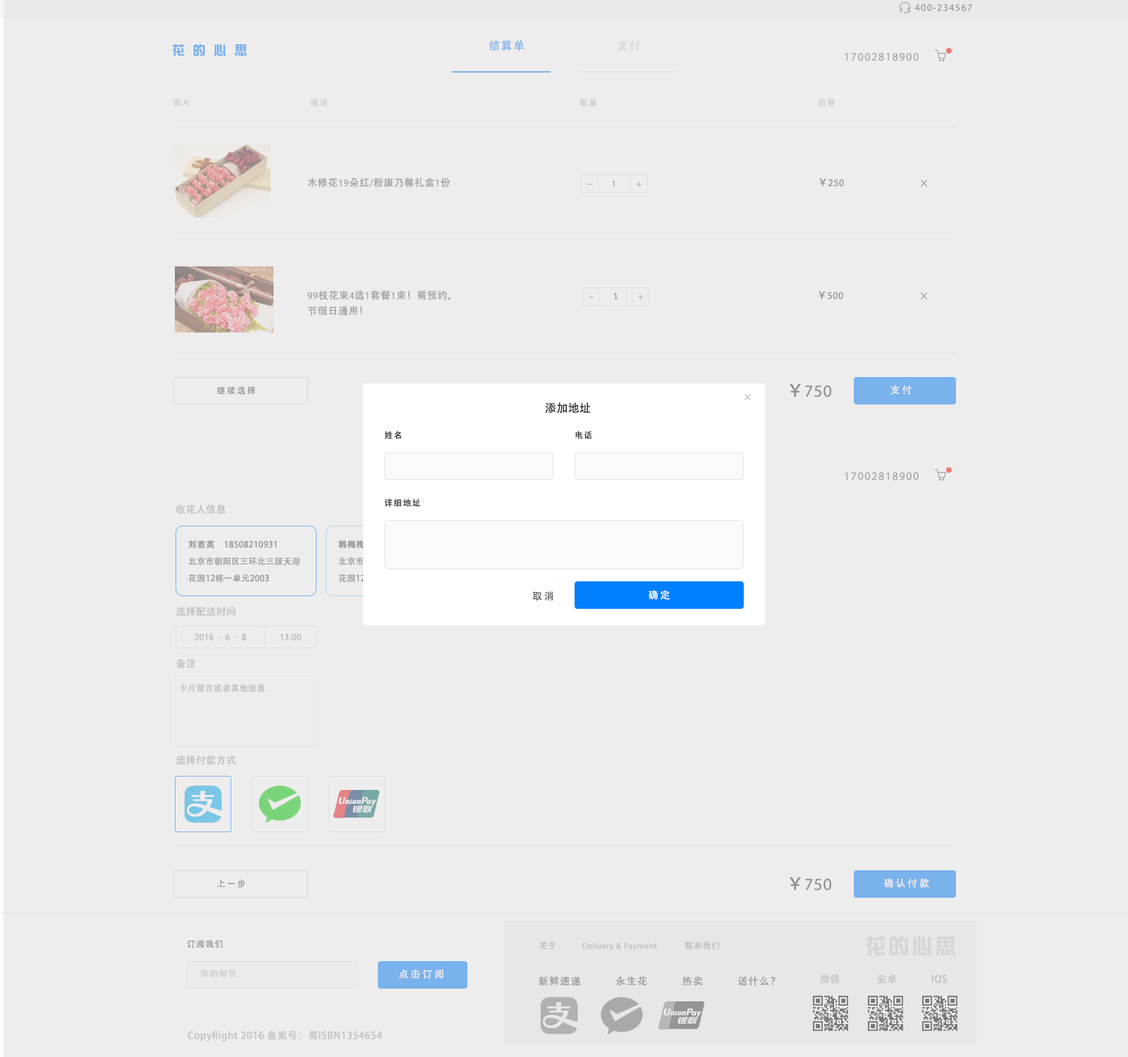
<style>
.page{position:relative;width:1128px;height:1057px;background:#eeeded}
.page>*{position:absolute;margin:0}
.t1{font:9.9px "MyriadPro-Regular";letter-spacing:0.1em;color:#989797}
.t2{font:11.3px "AdobeHeitiStd-Regular";letter-spacing:0.1em;color:#79b2ed}
.t3{font:11.3px "AdobeHeitiStd-Regular";letter-spacing:0.1em;color:#cccccc}
.t4{font:12.7px "DFZongYi-Bd-80-Win-GB";letter-spacing:0.64em;color:#79b2ed}
.t5{font:11.3px "MyriadPro-Regular";letter-spacing:0.1em;color:#a7a6a7}
.t6{font:8.5px "AdobeHeitiStd-Regular";letter-spacing:0.1em;color:#bbbbbb;text-transform:uppercase}
.t7{font:9.9px "AdobeHeitiStd-Regular";letter-spacing:0.04em;color:#a09f9f}
.t8{font:9.9px "MyriadPro-Regular";letter-spacing:0.04em;color:#a09f9f}
.t9{font:8.5px "MyriadPro-Regular";letter-spacing:0.2em;color:#909090;text-transform:uppercase}
.t10{font:9.9px "MyriadPro-Regular";letter-spacing:0.04em;color:#909090}
.t11{font:9.9px "AdobeHeitiStd-Regular";letter-spacing:0.04em;color:#909090}
.t12{font:9.9px/15.5px "AdobeHeitiStd-Regular";letter-spacing:0.04em;color:#a09f9f}
.t13{font:9.9px/15.5px "MyriadPro-Regular";letter-spacing:0.04em;color:#a09f9f}
.t14{font:8.5px "Lato-Regular";letter-spacing:0.2em;color:#909090;text-transform:uppercase}
.t15{font:8.5px "AdobeHeitiStd-Regular";letter-spacing:0.2em;color:#909090;text-transform:uppercase}
.t16{font:16.9px "MyriadPro-Regular";letter-spacing:0.04em;color:#909090}
.t17{font:16.9px "AdobeHeitiStd-Regular";letter-spacing:0.04em;color:#909090}
.t18{font:9.9px "AdobeHeitiStd-Regular";letter-spacing:0.2em;color:#ffffff;text-transform:uppercase}
.t19{font:11.3px "AdobeHeitiStd-Regular";letter-spacing:0.02em;color:#333333}
.t20{font:8.5px "AdobeHeitiStd-Regular";letter-spacing:0.1em;color:#333333;text-transform:uppercase}
.t21{font:9.9px "AdobeHeitiStd-Regular";letter-spacing:0.02em;color:#bfbebe}
.t22{font:8.5px/16.9px "AdobeHeitiStd-Regular";letter-spacing:0.02em;color:#999898}
.t23{font:8.5px/16.9px "AdobeHeitiStd-Regular";letter-spacing:0.02em;color:#999898;font-weight:bold}
.t24{font:8.5px/16.9px "AdobeHeitiStd-Regular";letter-spacing:0.02em}
.t25{font:8.5px/16.9px "AdobeHeitiStd-Regular";letter-spacing:0.02em;font-weight:bold}
.t26{font:9.9px "AdobeHeitiStd-Regular";letter-spacing:0.2em;color:#666666;text-transform:uppercase}
.t27{font:8.5px "AdobeHeitiStd-Regular";letter-spacing:0.02em;color:#bfbebe}
.t28{font:8.5px "AdobeHeitiStd-Regular";letter-spacing:0.1em;color:#909090;text-transform:uppercase}
.t29{font:8.5px "MyriadPro-Regular";letter-spacing:0.04em;color:#bfbebe}
.t30{font:8.5px "AdobeHeitiStd-Regular";letter-spacing:0.04em;color:#bfbebe}
.t31{font:21.1px "DFZongYi-Bd-80-Win-GB";letter-spacing:0.1em;color:#cccccc}
.t32{font:8.5px "AdobeHeitiStd-Regular";letter-spacing:0.1em;color:#bbbbbb}
.t33{font:9.9px "AdobeHeitiStd-Regular";letter-spacing:0.1em;color:#989797}
.t34{font:9.9px "AdobeHeitiStd-Regular";letter-spacing:0.04em;color:#c4c2c2}
</style>
<div class="page">
<p class="t1" style="left:914px;top:4px;width:58px;height:7px">400-234567</p>
<p class="t2" style="left:489px;top:39px;width:35px;height:12px">结算单</p>
<p class="t3" style="left:617px;top:40px;width:23px;height:11px">支付</p>
<p class="t4" style="left:172px;top:44px;width:75px;height:12px">花的心思</p>
<p class="t5" style="left:844px;top:53px;width:74px;height:8px">17002818900</p>
<p class="t6" style="left:173px;top:99px;width:17px;height:7px">图片</p>
<p class="t6" style="left:310px;top:98px;width:18px;height:8px">描述</p>
<p class="t6" style="left:579px;top:99px;width:18px;height:7px">数量</p>
<p class="t6" style="left:818px;top:98px;width:17px;height:9px">价格</p>
<p class="t7" style="left:307px;top:178px;width:143px;height:9px">木修花<span class="t8">19</span>朵红<span class="t8">/</span>粉康乃馨礼盒<span class="t8">1</span>份</p>
<p class="t9" style="left:612px;top:180px;width:3px;height:7px">1</p>
<p class="t10" style="left:819px;top:178px;width:25px;height:9px"><span class="t11">￥</span>250</p>
<p class="t12" style="left:307px;top:290px;width:143px;height:26px"><span class="t13">99</span>枝花束<span class="t13">4</span>选<span class="t13">1</span>套餐<span class="t13">1</span>束！需预约，<br>节假日通用！</p>
<p class="t14" style="left:613px;top:293px;width:4px;height:7px">1</p>
<p class="t10" style="left:818px;top:291px;width:25px;height:9px"><span class="t11">￥</span>500</p>
<p class="t15" style="left:217px;top:386px;width:39px;height:9px">继续选择</p>
<p class="t16" style="left:789px;top:384px;width:42px;height:14px"><span class="t17">￥</span>750</p>
<p class="t18" style="left:890px;top:385px;width:21px;height:10px">支付</p>
<p class="t19" style="left:545px;top:402px;width:46px;height:12px">添加地址</p>
<p class="t20" style="left:384px;top:431px;width:17px;height:8px">姓名</p>
<p class="t20" style="left:575px;top:431px;width:17px;height:8px">电话</p>
<p class="t5" style="left:844px;top:472px;width:74px;height:9px">17002818900</p>
<p class="t21" style="left:176px;top:504px;width:50px;height:11px">收花人信息</p>
<p class="t20" style="left:384px;top:498px;width:36px;height:9px">详细地址</p>
<p class="t22" style="left:188px;top:540px;width:112px;height:43px"><span class="t23">刘若英    </span>18508210931<br>北京市朝阳区三环北三段天湖<br>花园12栋一单元2003</p>
<p class="t24" style="left:338px;top:540px;width:112px;height:43px"><span class="t25">韩梅梅    </span>17008210931<br>北京市朝阳区三环北三段天湖<br>花园12栋一单元2204</p>
<p class="t26" style="left:532px;top:591px;width:21px;height:10px">取消</p>
<p class="t18" style="left:648px;top:590px;width:22px;height:10px">确定</p>
<p class="t21" style="left:176px;top:607px;width:59px;height:10px">选择配送时间</p>
<p class="t27" style="left:195px;top:634px;width:106px;height:7px">2016  -  6  -  8                13:00</p>
<p class="t21" style="left:176px;top:659px;width:19px;height:10px">备注</p>
<p class="t27" style="left:179px;top:684px;width:86px;height:9px">卡片留言或者其他信息</p>
<p class="t21" style="left:176px;top:756px;width:60px;height:9px">选择付款方式</p>
<p class="t15" style="left:217px;top:880px;width:28px;height:8px">上一步</p>
<p class="t16" style="left:789px;top:878px;width:42px;height:13px"><span class="t17">￥</span>750</p>
<p class="t18" style="left:884px;top:878px;width:45px;height:10px">确认付款</p>
<p class="t28" style="left:187px;top:940px;width:36px;height:8px">订阅我们</p>
<p class="t29" style="left:539px;top:942px;width:180px;height:10px"><span class="t30">关于</span>            Delivery &amp; Payment             <span class="t30">联系我们</span></p>
<p class="t31" style="left:866px;top:936px;width:89px;height:20px">花的心思</p>
<p class="t32" style="left:200px;top:969px;width:36px;height:9px">您的邮件</p>
<p class="t18" style="left:399px;top:969px;width:44px;height:10px">点击订阅</p>
<p class="t33" style="left:539px;top:976px;width:236px;height:10px">新鲜速递           永生花           热卖           送什么？</p>
<p class="t34" style="left:820px;top:974px;width:127px;height:10px">微信              安卓             IOS</p>
<p class="t34" style="left:187px;top:1031px;width:195px;height:11px">CopyRight 2016 备案号：蜀ISBN1354654</p>
</div>
